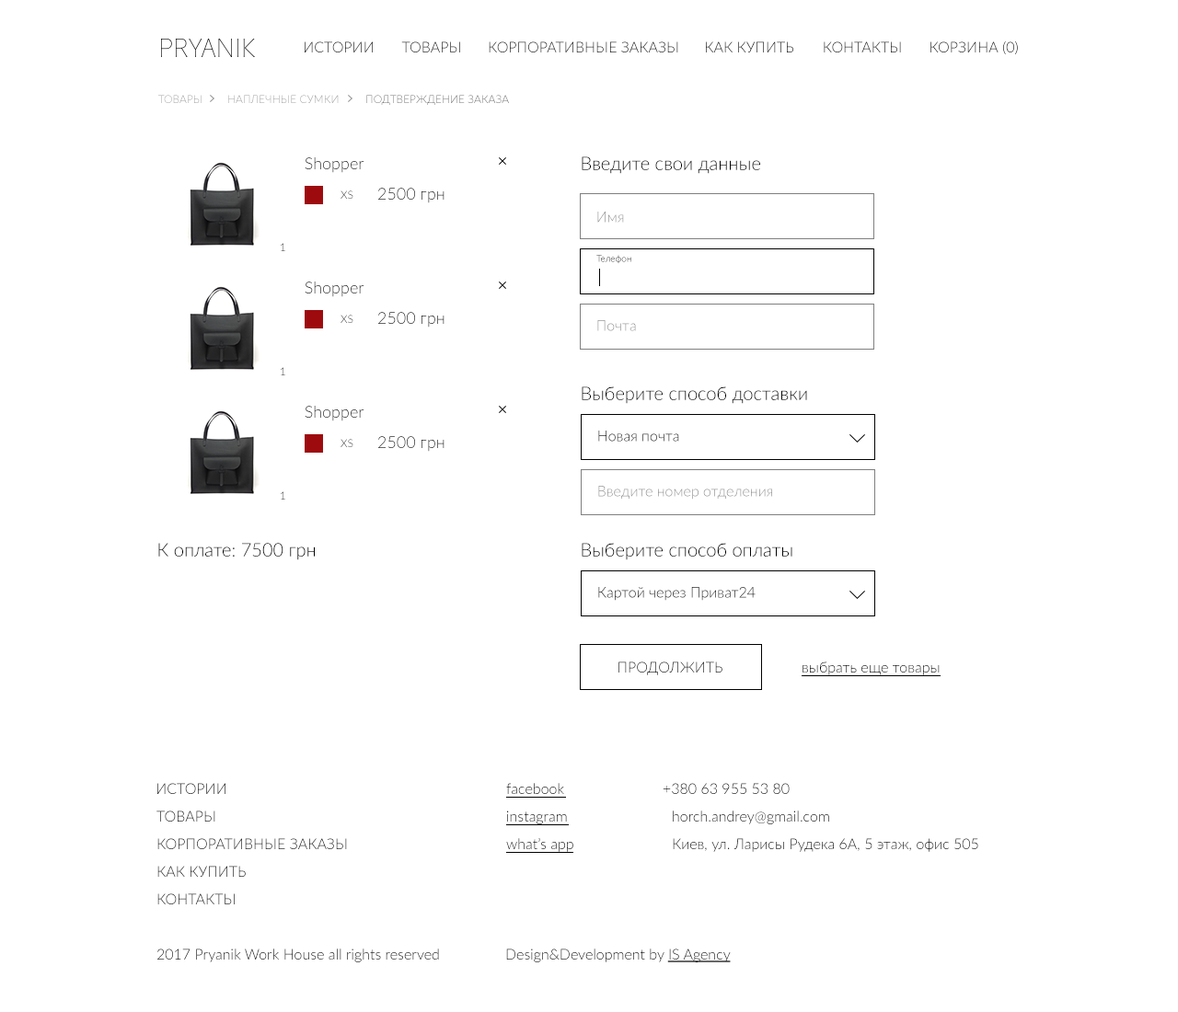
<style>
.page{position:relative;width:1178px;height:1012px;background:#ffffff}
.page>*{position:absolute;margin:0}
.t1{font:14.7px "Lato-Light";text-transform:uppercase}
.t2{font:11px "Lato-Light";text-transform:uppercase}
.t3{font:16.6px "Lato-Light"}
.t4{font:18.4px "Lato-Light";color:#000000}
.t5{font:11px "Lato-Light"}
.t6{font:14.7px "Lato-Light"}
.t7{font:9.2px "Lato-Light"}
.t8{font:14.7px "Lato-Light";color:#000000}
.t9{font:14.7px "Lato-Light";color:#000000;text-decoration:underline}
</style>
<div class="page">
<p class="t1" style="left:305px;top:41px;width:68px;height:11px">Истории</p>
<p class="t1" style="left:401px;top:41px;width:59px;height:11px">Товары</p>
<p class="t1" style="left:489px;top:41px;width:189px;height:11px">КоРпоративные заказы</p>
<p class="t1" style="left:706px;top:41px;width:87px;height:11px">как купить</p>
<p class="t1" style="left:824px;top:41px;width:77px;height:11px">Контакты</p>
<p class="t1" style="left:930px;top:40px;width:88px;height:14px">Корзина (0)</p>
<p class="t2" style="left:158px;top:95px;width:44px;height:8px">Товары</p>
<p class="t2" style="left:228px;top:95px;width:111px;height:8px">Наплечные сумки</p>
<p class="t2" style="left:366px;top:95px;width:143px;height:10px">Подтверждение заказа</p>
<p class="t3" style="left:305px;top:157px;width:59px;height:16px">Shopper</p>
<p class="t4" style="left:582px;top:156px;width:178px;height:18px">Введите свои данные</p>
<p class="t5" style="left:341px;top:190px;width:12px;height:9px">XS</p>
<p class="t3" style="left:378px;top:188px;width:66px;height:15px">2500 грн</p>
<p class="t6" style="left:597px;top:212px;width:27px;height:11px">Имя</p>
<p class="t5" style="left:281px;top:243px;width:4px;height:8px">1</p>
<p class="t7" style="left:596px;top:255px;width:35px;height:9px">Телефон</p>
<p class="t3" style="left:305px;top:282px;width:59px;height:15px">Shopper</p>
<p class="t5" style="left:341px;top:315px;width:12px;height:8px">XS</p>
<p class="t3" style="left:378px;top:312px;width:66px;height:16px">2500 грн</p>
<p class="t6" style="left:597px;top:320px;width:39px;height:11px">Почта</p>
<p class="t5" style="left:281px;top:367px;width:4px;height:8px">1</p>
<p class="t4" style="left:582px;top:387px;width:225px;height:17px">Выберите способ доставки</p>
<p class="t3" style="left:305px;top:406px;width:59px;height:15px">Shopper</p>
<p class="t3" style="left:378px;top:436px;width:66px;height:16px">2500 грн</p>
<p class="t6" style="left:598px;top:431px;width:81px;height:11px">Новая почта</p>
<p class="t5" style="left:341px;top:439px;width:12px;height:8px">XS</p>
<p class="t6" style="left:598px;top:486px;width:174px;height:14px">Введите номер отделения</p>
<p class="t5" style="left:281px;top:491px;width:4px;height:9px">1</p>
<p class="t4" style="left:158px;top:543px;width:157px;height:17px">К оплате: 7500 грн</p>
<p class="t4" style="left:582px;top:543px;width:210px;height:17px">Выберите способ оплаты</p>
<p class="t6" style="left:598px;top:587px;width:158px;height:14px">Картой через Приват24</p>
<p class="t1" style="left:618px;top:662px;width:104px;height:13px">Продолжить</p>
<p class="t8" style="left:802px;top:662px;width:138px;height:13px">выбрать еще товары</p>
<p class="t6" style="left:157px;top:783px;width:68px;height:11px">ИСТОРИИ</p>
<p class="t6" style="left:506px;top:783px;width:58px;height:11px">facebook</p>
<p class="t6" style="left:663px;top:783px;width:127px;height:11px">+380 63 955 53 80</p>
<p class="t6" style="left:156px;top:811px;width:59px;height:11px">ТОВАРЫ</p>
<p class="t6" style="left:507px;top:811px;width:60px;height:14px">instagram</p>
<p class="t6" style="left:673px;top:811px;width:156px;height:14px">horch.andrey@gmail.com</p>
<p class="t1" style="left:157px;top:838px;width:190px;height:11px">Корпоративные заказы</p>
<p class="t6" style="left:506px;top:838px;width:67px;height:14px">what’s app</p>
<p class="t6" style="left:673px;top:838px;width:305px;height:14px">Киев, ул. Ларисы Рудека 6А, 5 этаж, офис 505</p>
<p class="t1" style="left:157px;top:866px;width:89px;height:11px">Как купить</p>
<p class="t6" style="left:157px;top:894px;width:78px;height:11px">КОНТАКТЫ</p>
<p class="t6" style="left:157px;top:949px;width:282px;height:14px">2017 Pryanik Work House all rights reserved</p>
<p class="t8" style="left:506px;top:949px;width:225px;height:14px">Design&amp;Development by <span class="t9">IS Agency</span></p>
</div>
